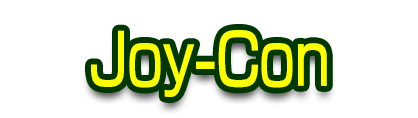
<style>
.page{position:relative;width:418px;height:118px;background:#ffffff}
.page>*{position:absolute;margin:0}
.t1{font:69.3px "NewRodinPro-DB";letter-spacing:-0.022em;color:#feff00;scale:0.74 1}
</style>
<div class="page">
<p class="t1" style="left:91px;top:30px;width:236px;height:67px">Joy-Con</p>
</div>
